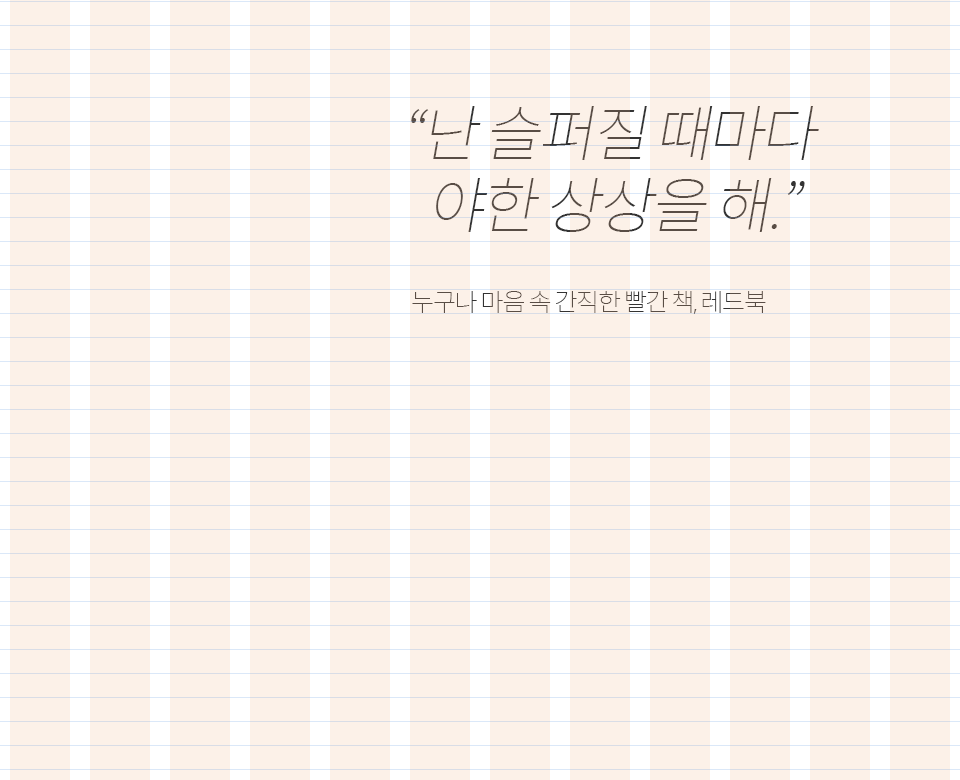
<style>
.page{position:relative;width:960px;height:780px;background:#fcf1e8}
.page>*{position:absolute;margin:0}
.t1{font:61px/48px "SpoqaHanSans-Thin";letter-spacing:-0.05em;color:#594d45;text-transform:uppercase;font-style:italic}
.t2{font:61px "SpoqaHanSans-Thin";letter-spacing:-0.05em;color:#594d45;text-transform:uppercase;font-style:italic}
.t3{font:25px "SpoqaHanSans-Thin";letter-spacing:-0.05em;color:#594d45;text-transform:uppercase}
</style>
<div class="page">
<p class="t1" style="left:411px;top:106px;width:408px;height:126px;text-align:center"><span class="t2">“</span>난 슬퍼질 때마다 <br>야한 상상을 해.”</p>
<p class="t3" style="left:412px;top:291px;width:354px;height:23px">누구나 마음 속 간직한 빨간 책, 레드북</p>
</div>
